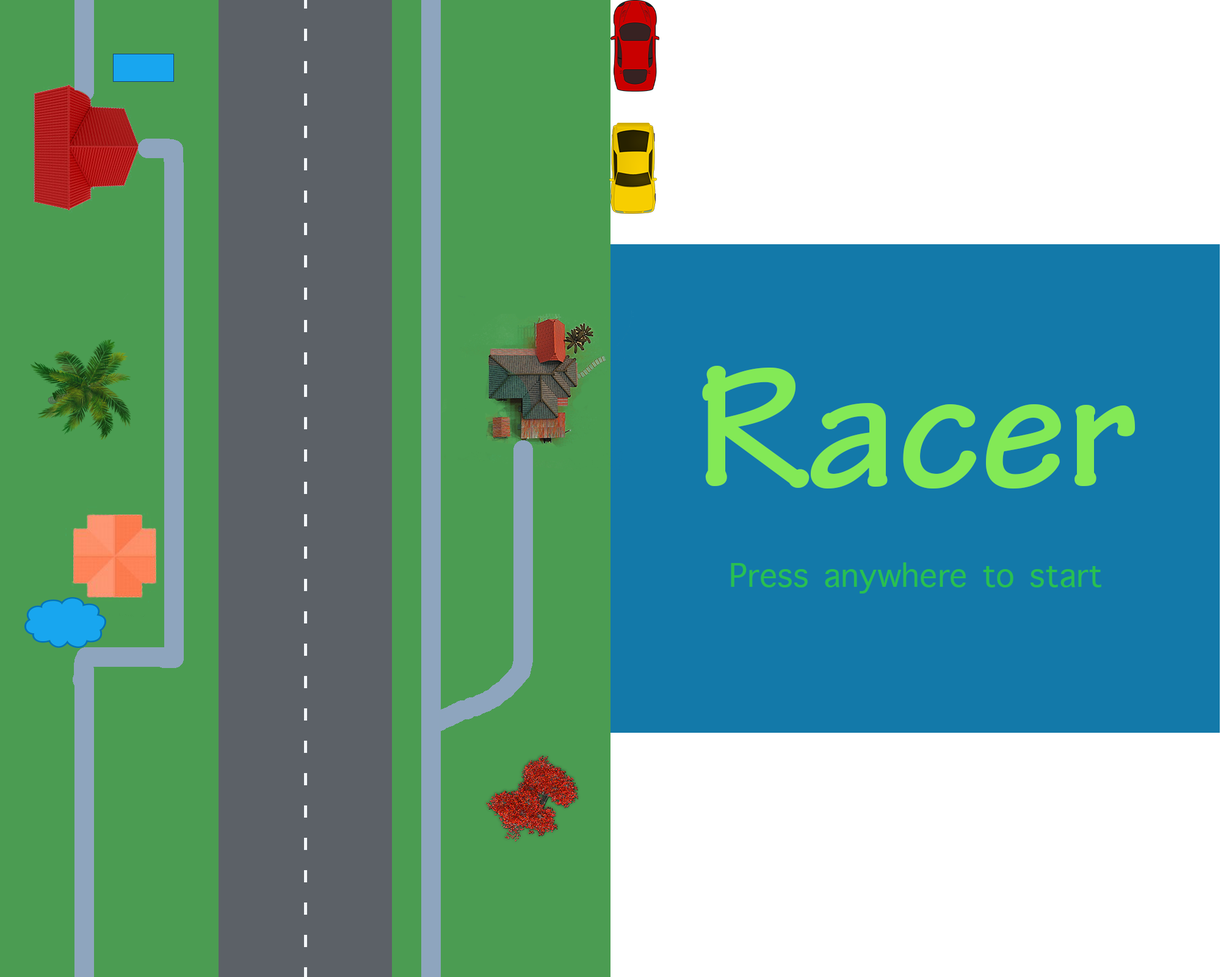
<style>
.page{position:relative;width:1221px;height:977px;background:#4b9c52}
.page>*{position:absolute;margin:0}
.t1{font:183.1px "TektonPro-Bold";color:#83e956}
.t2{font:44px "AppleSymbols";color:#29c050}
</style>
<div class="page">
<p class="t1" style="left:702px;top:366px;width:433px;height:123px">Racer</p>
<p class="t2" style="left:731px;top:562px;width:370px;height:31px">Press anywhere to start</p>
</div>
